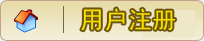
<style>
.page{position:relative;width:204px;height:41px}
.page>*{position:absolute;margin:0}
.t1{font:24px "SimHei";color:#f5e000}
</style>
<div class="page">
<p class="t1" style="left:81px;top:8px;width:95px;height:23px">用户注册</p>
</div>
